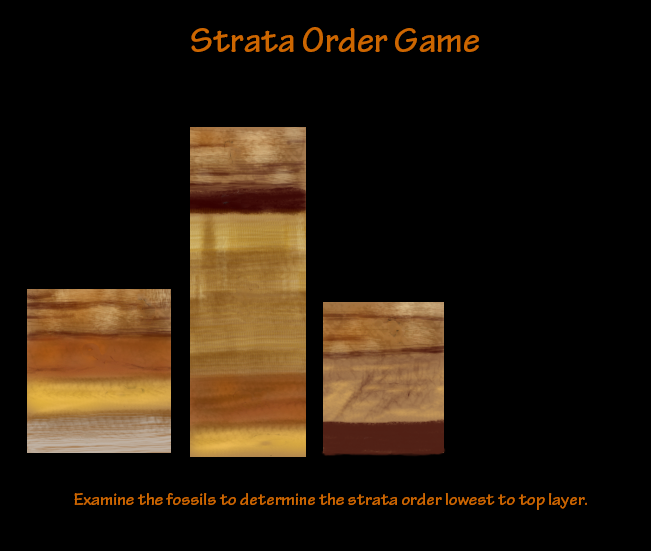
<style>
.page{position:relative;width:651px;height:551px;background:#000000}
.page>*{position:absolute;margin:0}
.t1{font:36px "TektonPro-Bold";color:#cc6600}
.t2{font:18px "TektonPro-Bold";color:#cc6600}
</style>
<div class="page">
<p class="t1" style="left:191px;top:27px;width:288px;height:25px">Strata Order Game</p>
<p class="t2" style="left:74px;top:493px;width:513px;height:17px">Examine the fossils to determine the strata order lowest to top layer.</p>
</div>
